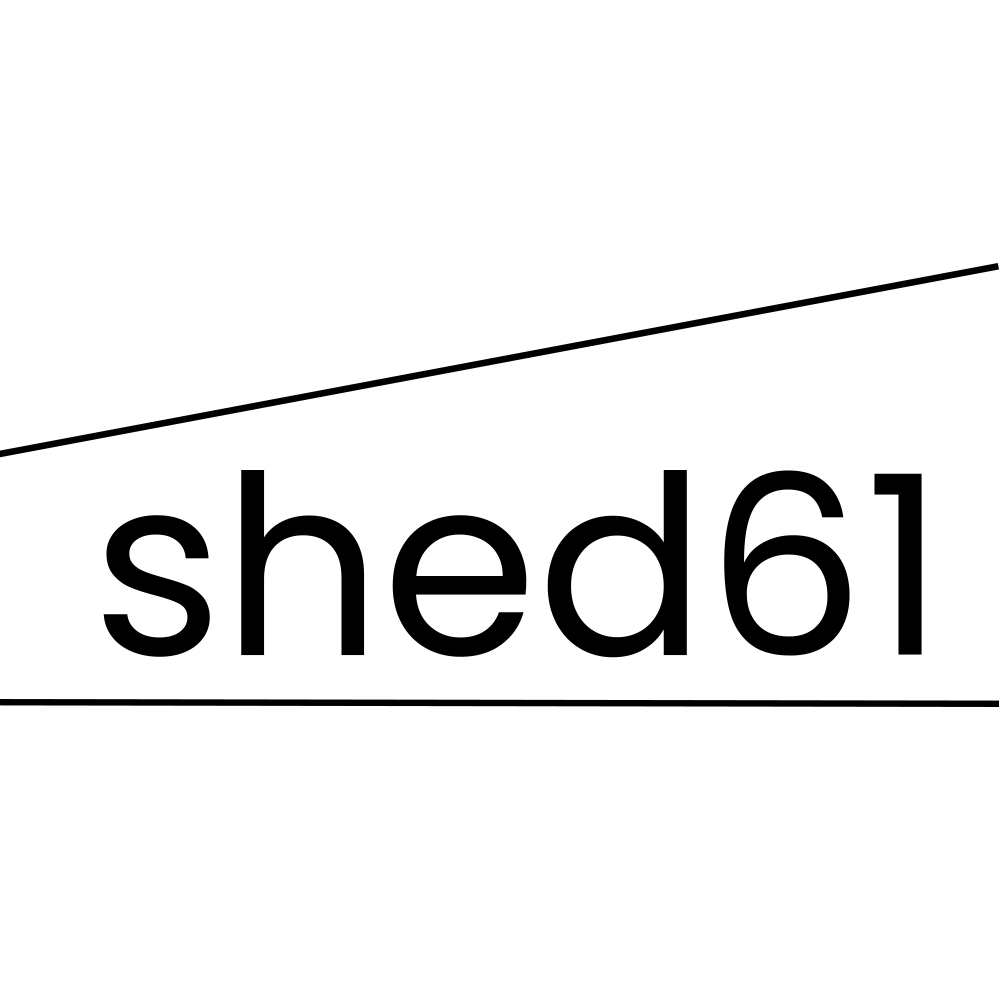
<style>
.page{position:relative;width:1000px;height:1000px;background:#ffffff}
.page>*{position:absolute;margin:0}
.t1{font:250px "Poppins-Regular";color:#000000}
</style>
<div class="page">
<p class="t1" style="left:103px;top:470px;width:819px;height:188px">shed61</p>
</div>
